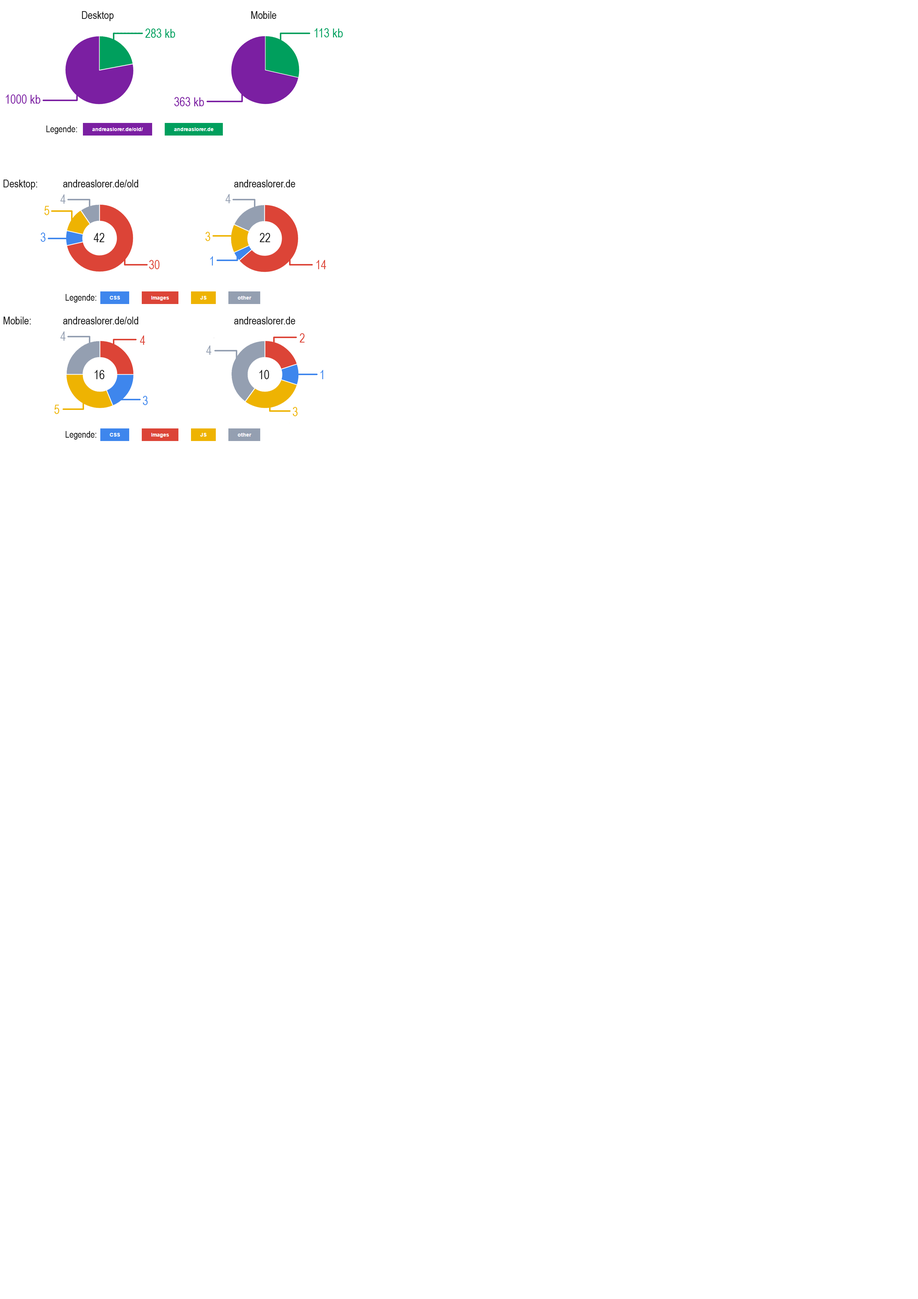
<style>
.page{position:relative;width:918px;height:1299px;background:#ffffff}
.page>*{position:absolute;margin:0}
.t1{font:10.8px "ArialNarrow";color:#1b1b1b}
.t2{font:12.3px "ArialNarrow";color:#009f5d}
.t3{font:12.3px "ArialNarrow";color:#7b1fa2}
.t4{font:9.3px "ArialNarrow";color:#1b1b1b}
.t5{font:12.3px "ArialNarrow";color:#949fb1}
.t6{font:12.3px "ArialNarrow";color:#eeb302}
.t7{font:12.3px "ArialNarrow";color:#3e86ed}
.t8{font:12.3px "ArialNarrow";color:#1b1b1b}
.t9{font:12.3px "ArialNarrow";color:#dc4437}
</style>
<div class="page">
<p class="t1" style="left:82px;top:11px;width:32px;height:10px">Desktop</p>
<p class="t1" style="left:251px;top:11px;width:26px;height:8px">Mobile</p>
<p class="t2" style="left:145px;top:29px;width:30px;height:9px">283 kb</p>
<p class="t2" style="left:314px;top:28px;width:29px;height:9px">113 kb</p>
<p class="t3" style="left:6px;top:94px;width:34px;height:10px">1000 kb</p>
<p class="t3" style="left:174px;top:97px;width:30px;height:9px">363 kb</p>
<p class="t4" style="left:46px;top:126px;width:31px;height:8px">Legende:</p>
<p class="t1" style="left:3px;top:180px;width:34px;height:10px">Desktop:</p>
<p class="t1" style="left:63px;top:180px;width:75px;height:7px">andreaslorer.de/old</p>
<p class="t1" style="left:234px;top:180px;width:61px;height:7px">andreaslorer.de</p>
<p class="t5" style="left:60px;top:194px;width:6px;height:10px">4</p>
<p class="t5" style="left:225px;top:194px;width:6px;height:9px">4</p>
<p class="t6" style="left:44px;top:206px;width:5px;height:9px">5</p>
<p class="t7" style="left:41px;top:232px;width:5px;height:10px">3</p>
<p class="t8" style="left:94px;top:233px;width:10px;height:9px">42</p>
<p class="t6" style="left:205px;top:232px;width:5px;height:9px">3</p>
<p class="t8" style="left:260px;top:233px;width:10px;height:9px">22</p>
<p class="t7" style="left:210px;top:256px;width:3px;height:9px">1</p>
<p class="t9" style="left:149px;top:260px;width:11px;height:9px">30</p>
<p class="t9" style="left:316px;top:260px;width:10px;height:9px">14</p>
<p class="t4" style="left:66px;top:294px;width:30px;height:8px">Legende:</p>
<p class="t1" style="left:3px;top:317px;width:28px;height:7px">Mobile:</p>
<p class="t1" style="left:63px;top:317px;width:75px;height:7px">andreaslorer.de/old</p>
<p class="t1" style="left:234px;top:317px;width:61px;height:7px">andreaslorer.de</p>
<p class="t5" style="left:60px;top:331px;width:6px;height:10px">4</p>
<p class="t9" style="left:140px;top:335px;width:5px;height:10px">4</p>
<p class="t9" style="left:300px;top:333px;width:5px;height:9px">2</p>
<p class="t5" style="left:206px;top:345px;width:5px;height:10px">4</p>
<p class="t8" style="left:94px;top:370px;width:10px;height:9px">16</p>
<p class="t8" style="left:259px;top:370px;width:10px;height:9px">10</p>
<p class="t7" style="left:320px;top:370px;width:3px;height:9px">1</p>
<p class="t7" style="left:143px;top:396px;width:5px;height:9px">3</p>
<p class="t6" style="left:54px;top:405px;width:5px;height:9px">5</p>
<p class="t6" style="left:293px;top:407px;width:5px;height:9px">3</p>
<p class="t4" style="left:66px;top:431px;width:30px;height:8px">Legende:</p>
</div>
